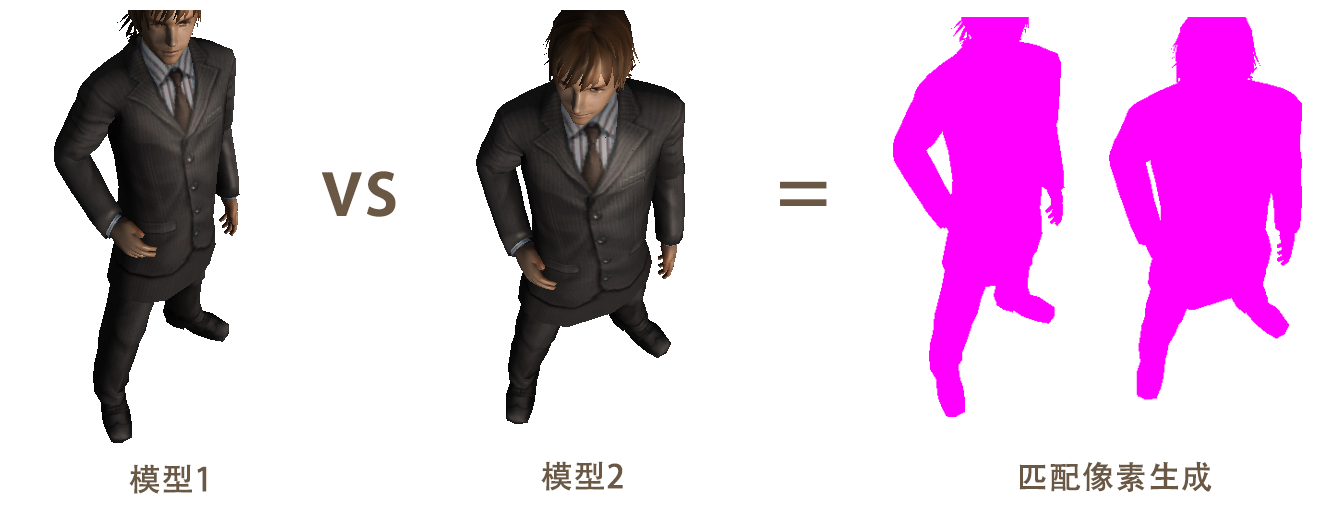
<style>
.page{position:relative;width:1325px;height:518px;background:#ffffff}
.page>*{position:absolute;margin:0}
.t1{font:78px "AdobeHeitiStd-Regular";color:#6b5844;font-weight:bold}
.t2{font:32px "AdobeHeitiStd-Regular";color:#6b5844;font-weight:bold}
</style>
<div class="page">
<p class="t1" style="left:322px;top:171px;width:74px;height:46px">vs</p>
<p class="t1" style="left:780px;top:181px;width:47px;height:25px">=</p>
<p class="t2" style="left:541px;top:461px;width:82px;height:30px">模型2</p>
<p class="t2" style="left:1019px;top:461px;width:193px;height:31px">匹配像素生成</p>
<p class="t2" style="left:129px;top:464px;width:78px;height:30px">模型1</p>
</div>
